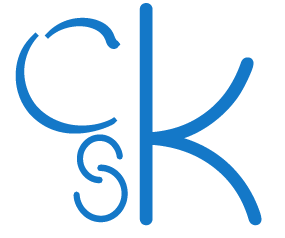
<style>
.page{position:relative;width:285px;height:238px;background:#ffffff}
.page>*{position:absolute;margin:0}
.t1{font:320px "CircleD";letter-spacing:0.16em;color:#1478c8;font-weight:bold}
.t2{font:160px "Emboss-Normal";letter-spacing:0.16em;color:#1478c8;font-weight:bold}
.t3{font:160px "CircleD";letter-spacing:0.16em;color:#1478c8;font-weight:bold;scale:0.94 1}
</style>
<div class="page">
<p class="t1" style="left:139px;top:3px;width:123px;height:223px">K</p>
<p class="t2" style="left:15px;top:17px;width:106px;height:117px">C</p>
<p class="t3" style="left:73px;top:134px;width:55px;height:89px">S</p>
</div>
